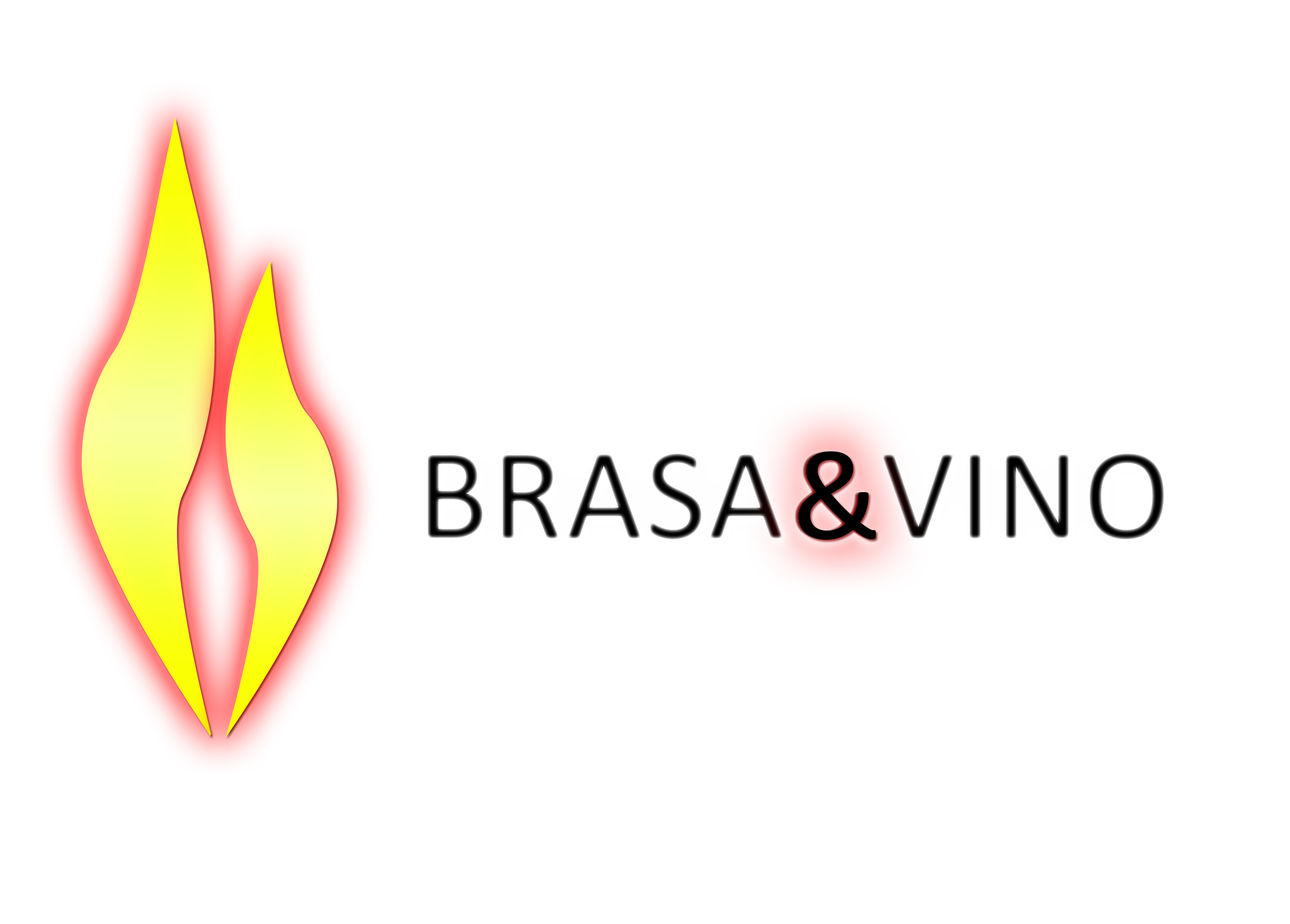
<style>
.page{position:relative;width:1290px;height:924px;background:#ffffff}
.page>*{position:absolute;margin:0}
.t1{font:131.5px "Calibri";letter-spacing:0.025em}
.t2{font:131.5px "Calibri";letter-spacing:0.025em;color:#000000}
</style>
<div class="page">
<p class="t1" style="left:428px;top:451px;width:736px;height:89px">BRASA&amp;VINO</p>
<p class="t2" style="left:798px;top:451px;width:78px;height:89px">&amp;</p>
</div>
